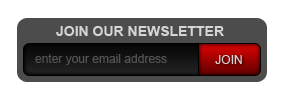
<style>
.page{position:relative;width:285px;height:98px;background:#ffffff}
.page>*{position:absolute;margin:0}
.t1{font:14px "Arial-BoldMT";color:#d5d5d5}
.t2{font:12px "ArialMT";color:#535151}
.t3{font:12px "ArialMT";color:#d5d5d5}
</style>
<div class="page">
<p class="t1" style="left:56px;top:26px;width:168px;height:10px">JOIN OUR NEWSLETTER</p>
<p class="t2" style="left:35px;top:54px;width:132px;height:11px">enter your email address</p>
<p class="t3" style="left:215px;top:55px;width:27px;height:9px">JOIN</p>
</div>
